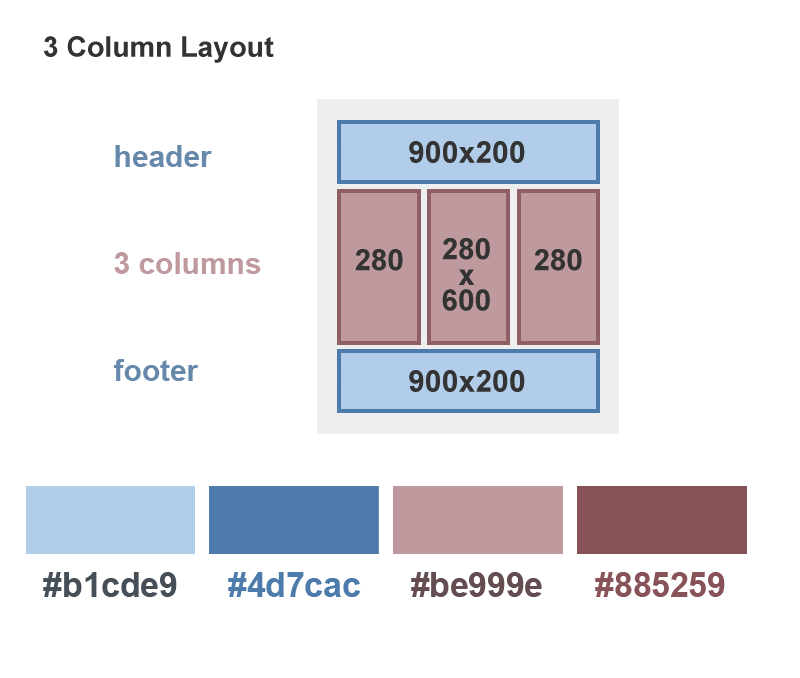
<style>
.page{position:relative;width:800px;height:678px;background:#ffffff}
.page>*{position:absolute;margin:0}
.t1{font:28.4px "Arial-BoldMT";color:#333333}
.t2{font:29.8px/107px "Arial-BoldMT";color:#be999e}
.t3{font:29.8px/107px "Arial-BoldMT";color:#6588ab}
.t4{font:30.2px "Arial-BoldMT";color:#333333}
.t5{font:29.7px/25.7px "Arial-BoldMT";color:#333333}
.t6{font:29.7px "Arial-BoldMT";color:#333333}
.t7{font:33.5px "Arial-BoldMT";color:#454e57}
.t8{font:33.5px "Arial-BoldMT";color:#4d7cac}
.t9{font:33.5px "Arial-BoldMT";color:#644d50}
.t10{font:33.5px "Arial-BoldMT";color:#885259}
</style>
<div class="page">
<p class="t1" style="left:44px;top:36px;width:230px;height:27px">3 Column Layout</p>
<p class="t2" style="left:113px;top:145px;width:148px;height:236px"><span class="t3">header<br></span>3 columns <br><span class="t3">footer</span></p>
<p class="t4" style="left:409px;top:141px;width:116px;height:22px">900x200</p>
<p class="t5" style="left:442px;top:238px;width:48px;height:73px;text-align:center">280<br>x<br>600</p>
<p class="t6" style="left:355px;top:249px;width:48px;height:22px">280</p>
<p class="t6" style="left:534px;top:249px;width:48px;height:22px">280</p>
<p class="t4" style="left:409px;top:370px;width:116px;height:22px">900x200</p>
<p class="t7" style="left:43px;top:572px;width:134px;height:25px">#b1cde9</p>
<p class="t8" style="left:228px;top:572px;width:133px;height:25px">#4d7cac</p>
<p class="t9" style="left:411px;top:572px;width:131px;height:25px">#be999e</p>
<p class="t10" style="left:595px;top:572px;width:130px;height:25px">#885259</p>
</div>
